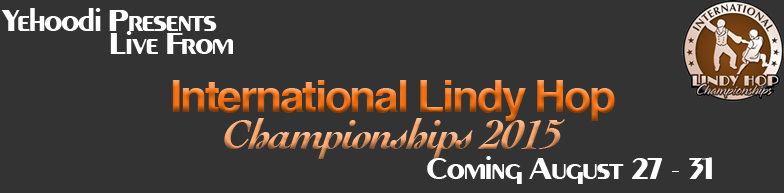
<style>
.page{position:relative;width:784px;height:193px;background:#333333}
.page>*{position:absolute;margin:0}
.t1{font:30px "CarnatiSSiBold";letter-spacing:-0.05em;color:#ffffff}
.t2{font:44.3px/36.9px "Helvetica-Bold";letter-spacing:-0.05em}
.t3{font:44.3px/36.9px "Cochin-BoldItalic";letter-spacing:-0.05em}
</style>
<div class="page">
<p class="t1" style="left:1px;top:8px;width:216px;height:23px">Yehoodi Presents</p>
<p class="t1" style="left:110px;top:31px;width:123px;height:23px">Live From</p>
<p class="t2" style="left:172px;top:80px;width:443px;height:79px;text-align:center">International Lindy Hop<br><span class="t3">Championships 2015</span></p>
<p class="t1" style="left:427px;top:156px;width:285px;height:28px">Coming August 27 - 31</p>
</div>
